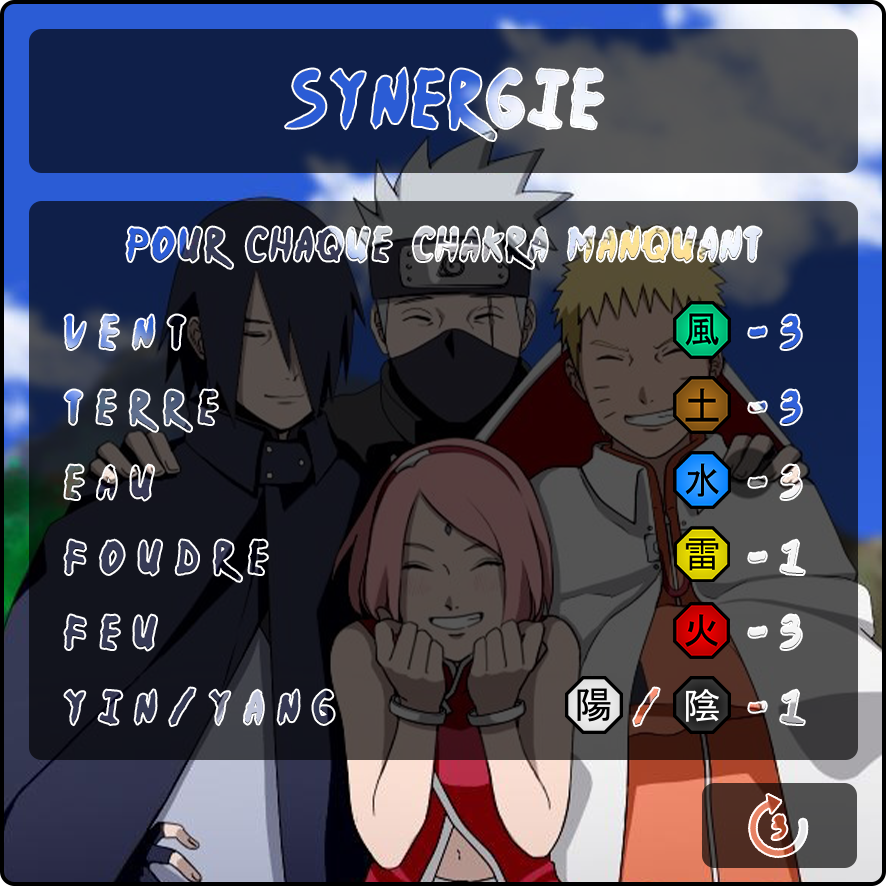
<style>
.page{position:relative;width:886px;height:886px}
.page>*{position:absolute;margin:0}
.t1{font:64.7px "Ninja-Naruto";letter-spacing:0.1em;scale:0.9 1}
.t2{font:37px/25px "Ninja-Naruto";letter-spacing:0.46em;scale:0.9 1}
.t3{font:37px/29.2px "Ninja-Naruto";letter-spacing:0.1em;scale:0.9 1}
</style>
<div class="page">
<p class="t1" style="left:286px;top:68px;width:317px;height:72px">synergie</p>
<p class="t2" style="left:65px;top:227px;width:739px;height:499px;text-align:center"><span class="t3"><br>Pour  chaque  chakra  manquant<br><br><br> </span>VENT                -3<br><br><br> TERRE               -3<br><br><br> EAU                  -3<br><br><br> FOUDRE             -1<br><br><br> FEU                 -3<br><br> <br> YIN/YANG          /   -1</p>
</div>
